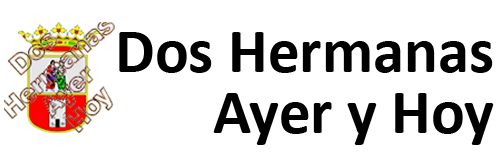
<style>
.page{position:relative;width:500px;height:167px;background:#ffffff}
.page>*{position:absolute;margin:0}
.t1{font:63px/61px "Calibri-Bold";color:#000000}
</style>
<div class="page">
<p class="t1" style="left:119px;top:32px;width:375px;height:113px;text-align:right">Dos Hermanas<br>Ayer y Hoy</p>
</div>
